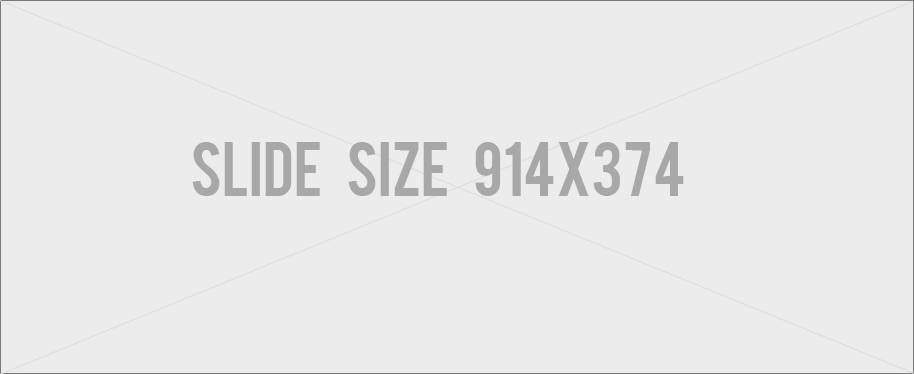
<style>
.page{position:relative;width:914px;height:374px;background:#ececec}
.page>*{position:absolute;margin:0}
.t1{font:60px "Bebas";color:#a8a8a8}
</style>
<div class="page">
<p class="t1" style="left:192px;top:142px;width:492px;height:54px">slide    size    914x374</p>
</div>
